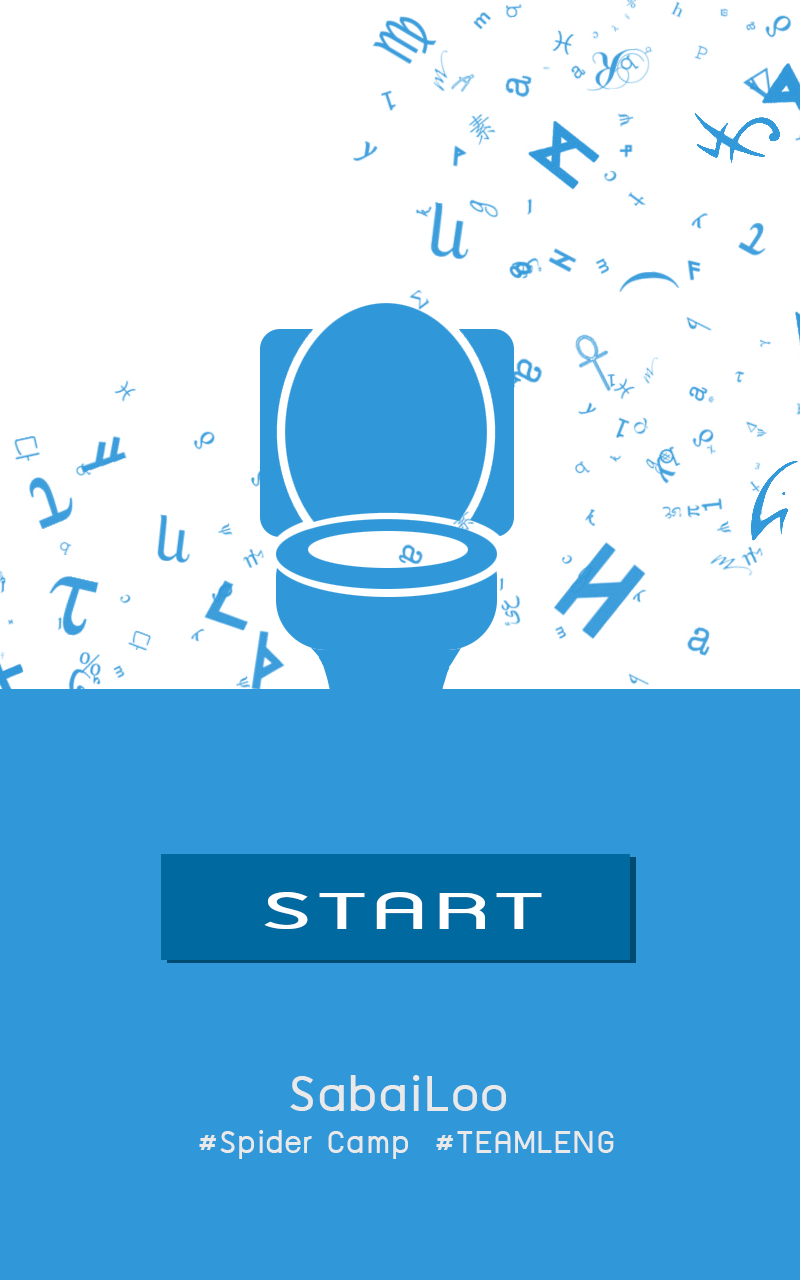
<style>
.page{position:relative;width:800px;height:1280px;background:#3097d9}
.page>*{position:absolute;margin:0}
.t1{font:60.3px "supermarket";letter-spacing:0.06em;color:#ffffff;scale:1.82 1}
.t2{font:57.4px "supermarket";letter-spacing:0.06em;color:#e9e9e9}
.t3{font:36px "supermarket";letter-spacing:0.06em;color:#e9e9e9}
</style>
<div class="page">
<p class="t1" style="left:264px;top:892px;width:278px;height:37px">START</p>
<p class="t2" style="left:290px;top:1075px;width:216px;height:36px">SabaiLoo</p>
<p class="t3" style="left:199px;top:1130px;width:415px;height:29px">#Spider Camp  #TEAMLENG</p>
</div>
